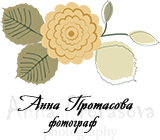
<style>
.page{position:relative;width:160px;height:140px;background:#ffffff}
.page>*{position:absolute;margin:0}
.t1{font:20.3px "AvalonMedium";color:#090808;font-weight:bold;scale:1.2 1}
.t2{font:20.3px "AvalonMedium";color:#090808;font-weight:bold}
</style>
<div class="page">
<p class="t1" style="left:17px;top:94px;width:116px;height:22px">Анна Протасова</p>
<p class="t2" style="left:43px;top:116px;width:57px;height:18px">фотограф</p>
</div>
